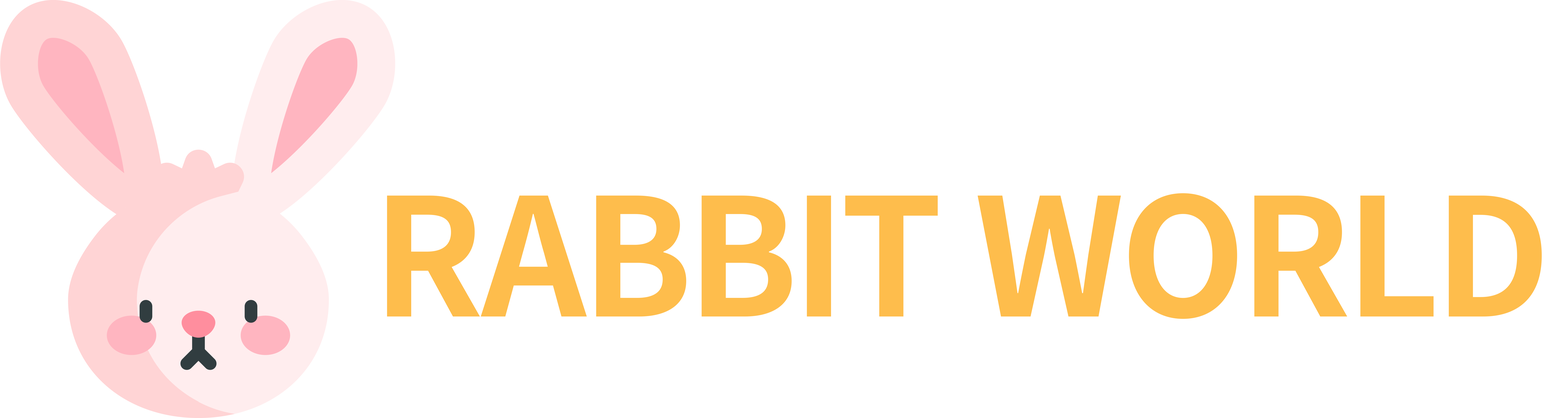
<style>
.page{position:relative;width:1568px;height:418px;background:#ffffff}
.page>*{position:absolute;margin:0}
.t1{font:163.3px "NotoSansCJKkr-Bold";letter-spacing:-0.01em;color:#febd4c}
</style>
<div class="page">
<p class="t1" style="left:387px;top:193px;width:1155px;height:126px">RABBIT WORLD</p>
</div>
